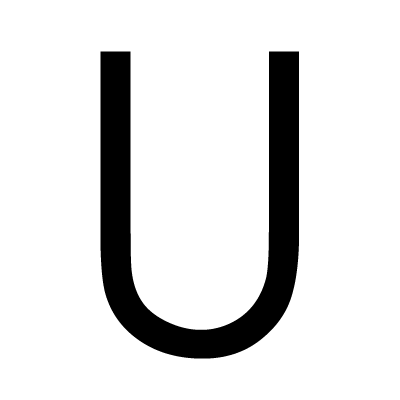
<style>
.page{position:relative;width:400px;height:400px;background:#ffffff}
.page>*{position:absolute;margin:0}
.t1{font:416.7px "CenturyGothic";color:#000000}
</style>
<div class="page">
<p class="t1" style="left:100px;top:51px;width:199px;height:308px">U</p>
</div>
